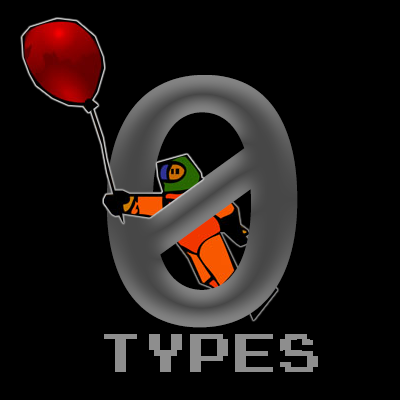
<style>
.page{position:relative;width:400px;height:400px;background:#000000}
.page>*{position:absolute;margin:0}
.t1{font:382px "Consolas-Bold";color:#555554}
.t2{font:54px "JoystixMonospace-Regular";color:#8e8e8e}
</style>
<div class="page">
<p class="t1" style="left:106px;top:75px;width:192px;height:253px">0</p>
<p class="t2" style="left:104px;top:334px;width:214px;height:38px">types</p>
</div>
